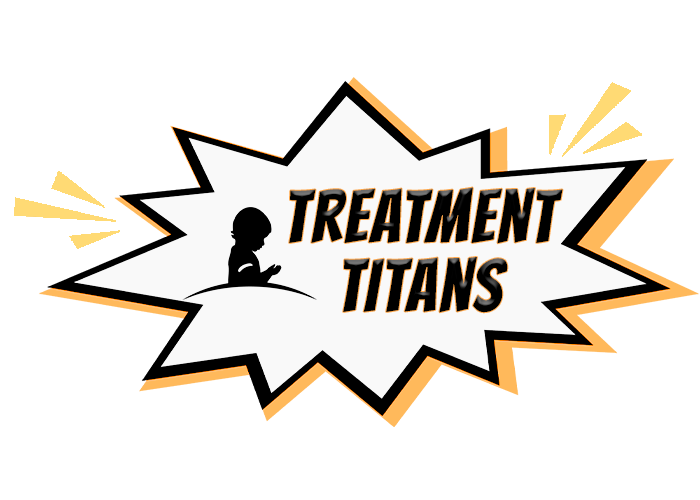
<style>
.page{position:relative;width:700px;height:500px;background:#ffffff}
.page>*{position:absolute;margin:0}
.t1{font:73.6px/69.3px "Bangers-Regular";letter-spacing:0.04em;color:#000000;scale:0.93 1}
</style>
<div class="page">
<p class="t1" style="left:289px;top:187px;width:274px;height:126px;text-align:center">Treatment<br>Titans</p>
</div>
